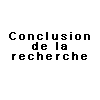
<style>
.page{position:relative;width:100px;height:100px;background:#ffffff}
.page>*{position:absolute;margin:0}
.t1{font:11px/9.9px "ArialMT";letter-spacing:0.2em;color:#000000;font-weight:bold}
</style>
<div class="page">
<p class="t1" style="left:9px;top:32px;width:81px;height:28px;text-align:center">Conclusion de la <br>recherche</p>
</div>
